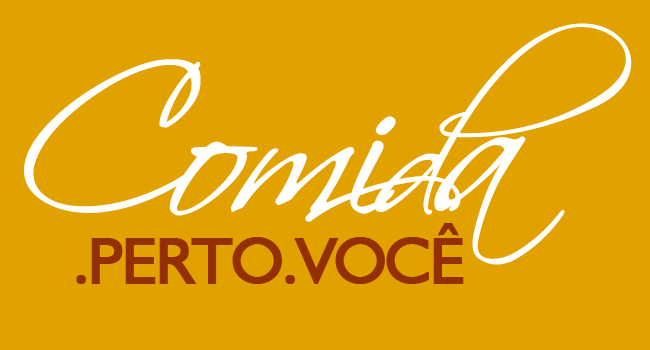
<style>
.page{position:relative;width:650px;height:350px;background:#e1a200}
.page>*{position:absolute;margin:0}
.t1{font:201.8px "ScriptinaPro";letter-spacing:-0.05em;color:#ffffff;font-weight:bold}
.t2{font:162px "ScriptinaPro";letter-spacing:-0.05em;color:#ffffff;font-weight:bold}
.t3{font:65.8px "Humanist521BT-Roman";letter-spacing:-0.05em;color:#932f00;font-weight:bold}
</style>
<div class="page">
<p class="t1" style="left:24px;top:23px;width:608px;height:242px">Comi<span class="t2">d</span>a</p>
<p class="t3" style="left:76px;top:223px;width:388px;height:61px">.PERTO.VOCÊ</p>
</div>
